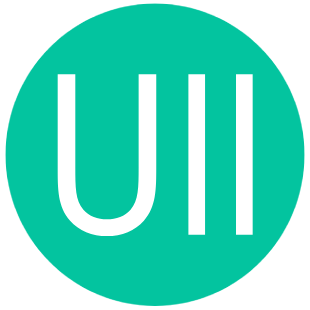
<style>
.page{position:relative;width:310px;height:310px;background:#03c49f}
.page>*{position:absolute;margin:0}
.t1{font:240.8px "Gidole-Regular";color:#ffffff}
</style>
<div class="page">
<p class="t1" style="left:57px;top:74px;width:196px;height:162px">Ull</p>
</div>
